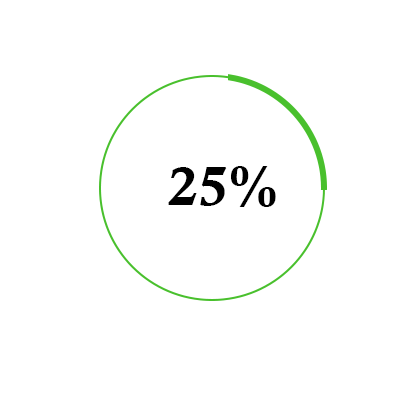
<style>
.page{position:relative;width:400px;height:400px;background:#ffffff}
.page>*{position:absolute;margin:0}
.t1{font:53.7px "CalisMTBol";color:#000000;scale:1.11 1}
</style>
<div class="page">
<p class="t1" style="left:168px;top:166px;width:108px;height:41px">25%</p>
</div>
